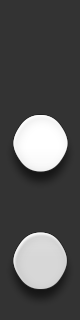
<style>
.page{position:relative;width:80px;height:320px;background:#333333}
.page>*{position:absolute;margin:0}
.t1{font:344.1px "Prelude-Medium"}
</style>
<div class="page">
<p class="t1" style="left:13px;top:115px;width:55px;height:174px">:</p>
<p class="t1" style="left:13px;top:115px;width:55px;height:174px">:</p>
</div>
